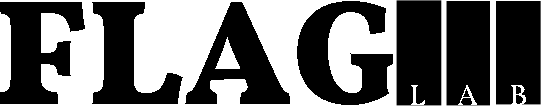
<style>
.page{position:relative;width:541px;height:106px;background:#000000}
.page>*{position:absolute;margin:0}
.t1{font:150px "Vollkorn-Black";color:#000000}
.t2{font:30px "Vollkorn-Regular";color:#ffffff}
</style>
<div class="page">
<p class="t1" style="left:0px;top:1px;width:393px;height:104px">FLAG</p>
<p class="t2" style="left:411px;top:85px;width:14px;height:20px">L</p>
<p class="t2" style="left:458px;top:85px;width:19px;height:20px">A</p>
<p class="t2" style="left:511px;top:85px;width:15px;height:20px">B</p>
</div>
